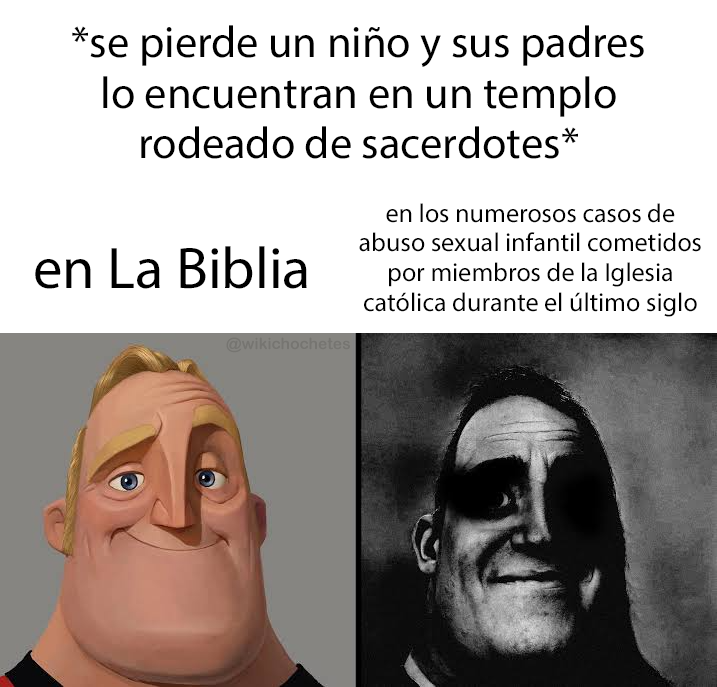
<style>
.page{position:relative;width:717px;height:687px;background:#ffffff}
.page>*{position:absolute;margin:0}
.t1{font:44.5px "MyriadPro-Regular";color:#000000}
.t2{font:26.2px "MyriadPro-Regular";color:#000000}
.t3{font:58.8px "MyriadPro-Regular";color:#000000}
.t4{font:15.7px "ArialRoundedMTBold";color:#767571}
</style>
<div class="page">
<p class="t1" style="left:72px;top:25px;width:572px;height:134px;text-align:center">*se pierde un niño y sus padres<br>lo encuentran en un templo<br>rodeado de sacerdotes*</p>
<p class="t2" style="left:359px;top:203px;width:342px;height:114px;text-align:center">en los numerosos casos de<br>abuso sexual infantil cometidos<br>por miembros de la Iglesia<br>católica durante el último siglo</p>
<p class="t3" style="left:35px;top:246px;width:272px;height:43px">en La Biblia</p>
<p class="t4" style="left:226px;top:337px;width:124px;height:16px">@wikichochetes</p>
</div>
